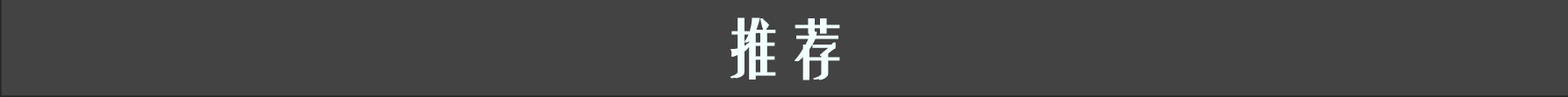
<style>
.page{position:relative;width:1568px;height:97px;background:#434343}
.page>*{position:absolute;margin:0}
.t1{font:63.2px "FZYTK--GBK1-0";color:#f1ffff;font-weight:bold}
</style>
<div class="page">
<p class="t1" style="left:730px;top:18px;width:110px;height:63px">推荐</p>
</div>
